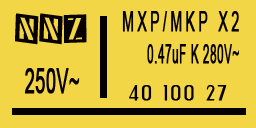
<style>
.page{position:relative;width:256px;height:128px;background:#f2d645}
.page>*{position:absolute;margin:0}
.t1{font:33.6px "Tinsnips";letter-spacing:0.02em;color:#060100;font-weight:bold;scale:0.52 1}
.t2{font:26.9px "ArialMT";letter-spacing:0.22em;color:#060100;font-weight:bold;scale:0.52 1}
.t3{font:26.9px "ArialNarrow";letter-spacing:0.02em;color:#060100;font-weight:bold;scale:0.52 1}
.t4{font:33.6px "ArialMT";letter-spacing:0.02em;color:#060100;font-weight:bold;scale:0.52 1}
.t5{font:19.2px "EngebrechtreExpanded";letter-spacing:0.18em;color:#060100;font-weight:bold;scale:0.73 1}
</style>
<div class="page">
<p class="t1" style="left:15px;top:13px;width:72px;height:32px">NNZ</p>
<p class="t2" style="left:122px;top:11px;width:117px;height:21px">MXP/MKP X2</p>
<p class="t3" style="left:147px;top:44px;width:92px;height:20px">0.47uF K 280V~</p>
<p class="t4" style="left:24px;top:68px;width:56px;height:26px">250V~</p>
<p class="t5" style="left:129px;top:85px;width:98px;height:16px">40 100 27</p>
</div>
